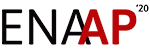
<style>
.page{position:relative;width:150px;height:50px;background:#ffffff}
.page>*{position:absolute;margin:0}
.t1{font:9.9px "Asap-SemiBold";color:#010000}
.t2{font:50.3px "Asap-Regular";color:#080408}
.t3{font:50.3px "Asap-SemiBold";color:#bb0408}
</style>
<div class="page">
<p class="t1" style="left:136px;top:3px;width:13px;height:9px">‘20</p>
<p class="t2" style="left:1px;top:9px;width:90px;height:36px">ENA</p>
<p class="t3" style="left:78px;top:9px;width:59px;height:36px">AP</p>
</div>
